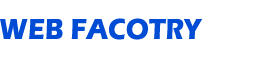
<style>
.page{position:relative;width:260px;height:60px;background:#ffffff}
.page>*{position:absolute;margin:0}
.t1{font:30px "ErasITC-Bold";color:#014cd5;text-transform:uppercase;scale:0.88 1}
</style>
<div class="page">
<p class="t1" style="left:0px;top:18px;width:203px;height:22px">web facotry</p>
</div>
